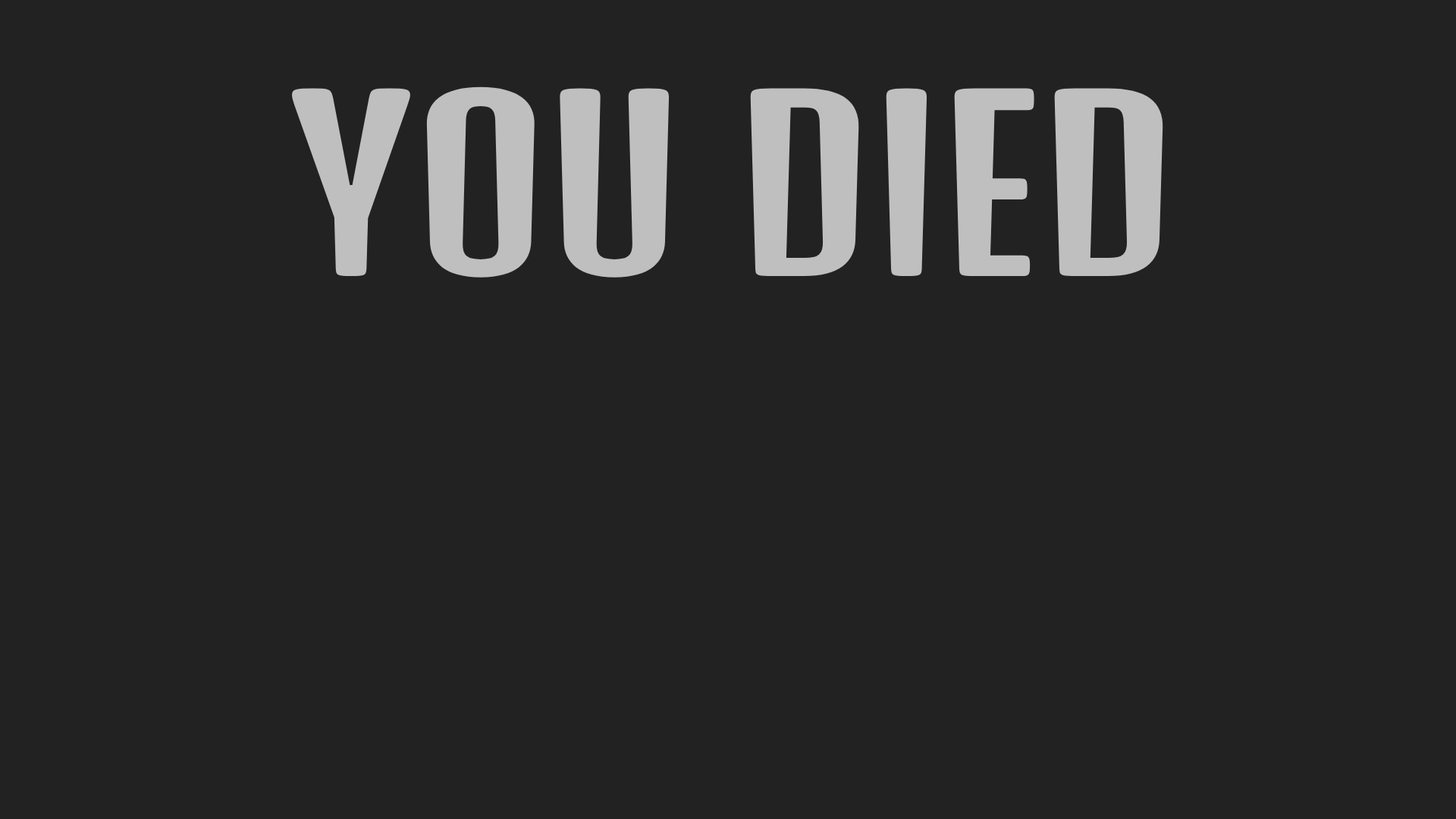
<style>
.page{position:relative;width:1456px;height:819px;background:#222222}
.page>*{position:absolute;margin:0}
.t1{font:227.5px "DenkOne-Regular";color:#bfbfbf}
</style>
<div class="page">
<p class="t1" style="left:292px;top:86px;width:871px;height:192px">YOU DIED</p>
</div>
